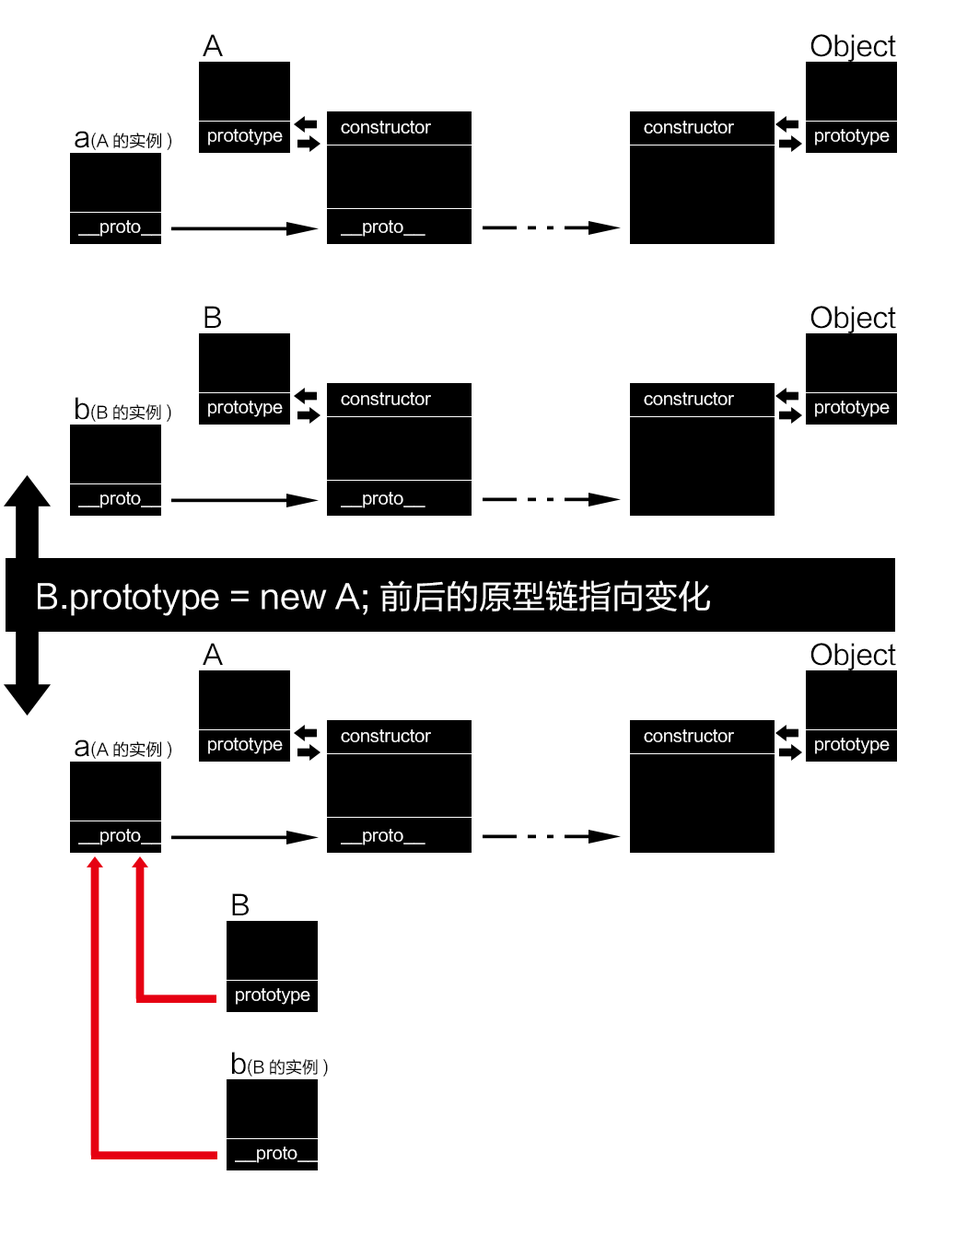
<style>
.page{position:relative;width:967px;height:1234px;background:#ffffff}
.page>*{position:absolute;margin:0}
.t1{font:27.6px "FZLTHJW--GB1-0";color:#000000}
.t2{font:16.6px "FZLTHJW--GB1-0";color:#ffffff}
.t3{font:16.6px "FZLTHJW--GB1-0";color:#000000}
.t4{font:27.7px "FZLTHJW--GB1-0";color:#000000}
.t5{font:33.1px "FZLTHJW--GB1-0";color:#ffffff}
</style>
<div class="page">
<p class="t1" style="left:203px;top:34px;width:20px;height:22px">A</p>
<p class="t1" style="left:810px;top:34px;width:86px;height:28px">Object</p>
<p class="t2" style="left:341px;top:121px;width:90px;height:12px">constructor</p>
<p class="t2" style="left:643px;top:121px;width:91px;height:12px">constructor</p>
<p class="t3" style="left:75px;top:131px;width:97px;height:19px"><span class="t4">a</span>(A的实例)</p>
<p class="t2" style="left:208px;top:129px;width:75px;height:16px">prototype</p>
<p class="t2" style="left:815px;top:129px;width:74px;height:16px">prototype</p>
<p class="t2" style="left:78px;top:220px;width:85px;height:17px">__proto__</p>
<p class="t2" style="left:341px;top:220px;width:84px;height:17px">__proto__</p>
<p class="t1" style="left:204px;top:306px;width:17px;height:22px">B</p>
<p class="t1" style="left:810px;top:306px;width:86px;height:27px">Object</p>
<p class="t3" style="left:75px;top:397px;width:96px;height:25px"><span class="t4">b</span>(B的实例)</p>
<p class="t2" style="left:208px;top:400px;width:75px;height:17px">prototype</p>
<p class="t2" style="left:341px;top:392px;width:90px;height:13px">constructor</p>
<p class="t2" style="left:643px;top:392px;width:91px;height:13px">constructor</p>
<p class="t2" style="left:815px;top:400px;width:74px;height:17px">prototype</p>
<p class="t2" style="left:78px;top:492px;width:85px;height:16px">__proto__</p>
<p class="t2" style="left:341px;top:492px;width:84px;height:16px">__proto__</p>
<p class="t5" style="left:38px;top:580px;width:672px;height:36px">B.prototype = new A; 前后的原型链指向变化</p>
<p class="t1" style="left:203px;top:643px;width:20px;height:22px">A</p>
<p class="t1" style="left:810px;top:643px;width:86px;height:27px">Object</p>
<p class="t2" style="left:208px;top:737px;width:75px;height:17px">prototype</p>
<p class="t2" style="left:341px;top:729px;width:90px;height:13px">constructor</p>
<p class="t2" style="left:643px;top:729px;width:91px;height:13px">constructor</p>
<p class="t2" style="left:815px;top:737px;width:74px;height:17px">prototype</p>
<p class="t3" style="left:75px;top:739px;width:97px;height:20px"><span class="t4">a</span>(A的实例)</p>
<p class="t2" style="left:78px;top:829px;width:85px;height:16px">__proto__</p>
<p class="t2" style="left:341px;top:829px;width:84px;height:16px">__proto__</p>
<p class="t1" style="left:232px;top:893px;width:17px;height:22px">B</p>
<p class="t2" style="left:236px;top:988px;width:74px;height:16px">prototype</p>
<p class="t3" style="left:232px;top:1051px;width:96px;height:25px"><span class="t4">b</span>(B的实例)</p>
<p class="t2" style="left:235px;top:1146px;width:84px;height:17px">__proto__</p>
</div>
